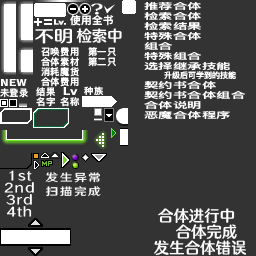
<style>
.page{position:relative;width:256px;height:256px;background:#333333}
.page>*{position:absolute;margin:0}
.t1{font:8.4px/10px "DFKingGothicSC14-Semibold";letter-spacing:0.005em;color:#ffffff;scale:1.71 1}
.t2{font:10.7px "DFKingGothicSC14-Semibold";letter-spacing:0.045em;color:#ffffff}
.t3{font:15.3px "FZFW-QingYinTiS-B--GB1-0";letter-spacing:0.005em;color:#ffffff}
.t4{font:9.3px/10px "DFKingGothicSC14-Semibold";letter-spacing:0.045em;color:#ffffff}
.t5{font:8px "DFKingGothicSC14-Semibold";letter-spacing:0.005em;color:#ffffff}
.t6{font:9.3px "DFKingGothicSC14-Semibold";letter-spacing:0.045em;color:#ffffff}
.t7{font:8.9px "DFKingGothicSC14-Semibold";letter-spacing:0.045em;color:#ffffff;scale:1.05 1}
.t8{font:13.3px/12px "HYWenHei-FEW";letter-spacing:0.045em;color:#ffffff;scale:1.2 1}
.t9{font:10.7px/13.3px "HYWenHei-FEW";letter-spacing:0.105em;color:#ffffff;scale:1.2 1}
</style>
<div class="page">
<p class="t1" style="left:144px;top:2px;width:86px;height:68px">推荐合体<br>检索合体<br>检索结果<br>特殊合体<br>组合<br>特殊组合<br>选择继承技能</p>
<p class="t2" style="left:70px;top:15px;width:44px;height:11px">使用全书</p>
<p class="t3" style="left:76px;top:28px;width:46px;height:15px">检索中</p>
<p class="t4" style="left:41px;top:47px;width:38px;height:40px;text-align:center">召唤费用<br>合体素材<br>消耗魔货<br>合体费用</p>
<p class="t4" style="left:88px;top:47px;width:28px;height:20px;text-align:center">第一只<br>第二只</p>
<p class="t5" style="left:164px;top:71px;width:72px;height:8px">升级后可学到的技能</p>
<p class="t6" style="left:0px;top:88px;width:28px;height:10px">未登录</p>
<p class="t4" style="left:36px;top:87px;width:19px;height:20px;text-align:center">结果<br>名字</p>
<p class="t7" style="left:84px;top:86px;width:20px;height:9px">种族</p>
<p class="t1" style="left:144px;top:80px;width:101px;height:39px">契约书合体<br>契约书合体组合<br>合体说明<br>恶魔合体程序</p>
<p class="t6" style="left:60px;top:97px;width:20px;height:10px">名称</p>
<p class="t8" style="left:4px;top:170px;width:30px;height:47px;text-align:center">1st<br>2nd<br>3rd<br>4th</p>
<p class="t9" style="left:45px;top:172px;width:56px;height:25px;text-align:center">发生异常<br>扫描完成</p>
<p class="t3" style="left:158px;top:208px;width:77px;height:16px">合体进行中</p>
<p class="t3" style="left:176px;top:224px;width:61px;height:16px">合体完成</p>
<p class="t3" style="left:154px;top:240px;width:92px;height:16px">发生合体错误</p>
</div>
